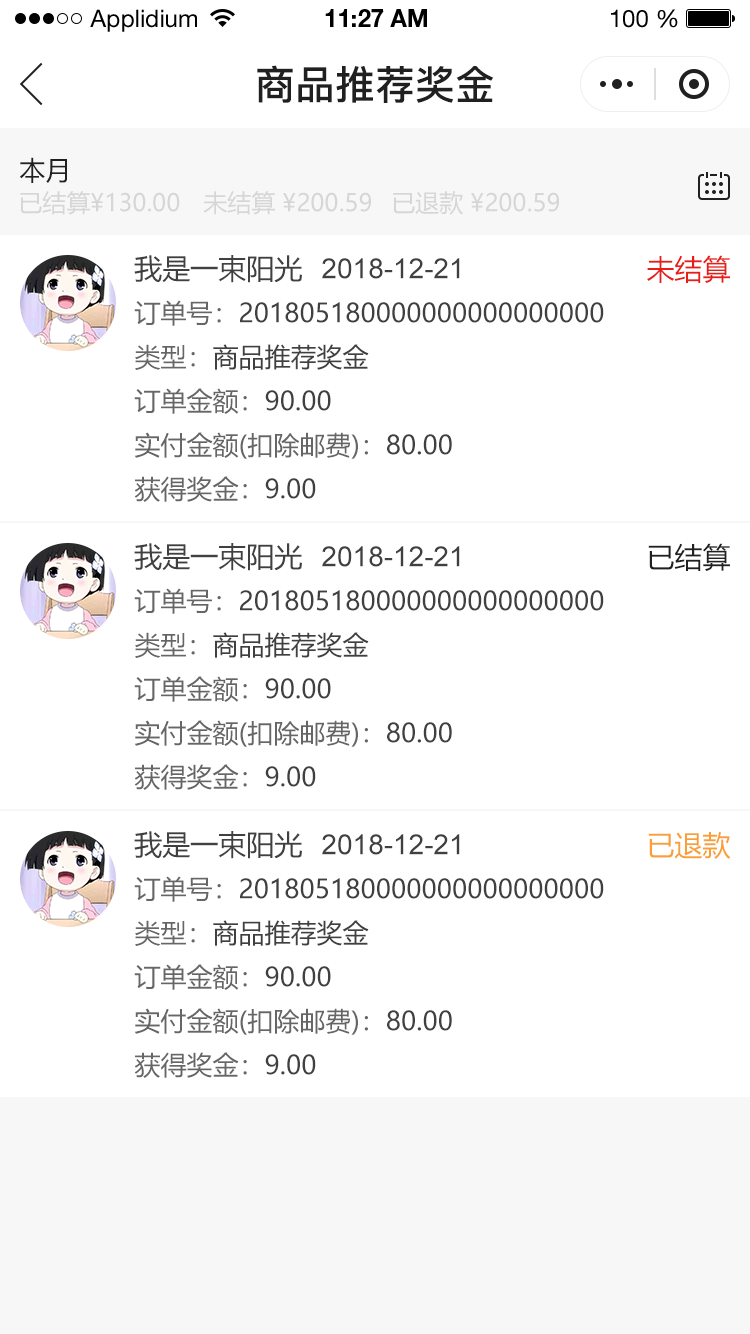
<style>
.page{position:relative;width:750px;height:1334px;background:#ffffff}
.page>*{position:absolute;margin:0}
.t1{font:24px "HelveticaNeueLTStd-Roman";color:#000000}
.t2{font:24px "HelveticaNeueLTStd-Bd";color:#000000}
.t3{font:40px "PingFang-SC-Bold";color:#202020;text-transform:uppercase}
.t4{font:26px "MicrosoftYaHei";color:#202020;text-transform:uppercase}
.t5{font:24px "MicrosoftYaHei";color:#d6d6d6;text-transform:uppercase}
.t6{font:28px "MicrosoftYaHei";color:#404040;text-transform:uppercase}
.t7{font:28px "MicrosoftYaHei";color:#e61f18;text-transform:uppercase}
.t8{font:28px "ArialMT";color:#404040;text-transform:uppercase}
.t9{font:26px "MicrosoftYaHei";color:#404040;text-transform:uppercase}
.t10{font:26px "MicrosoftYaHei";color:#666666;text-transform:uppercase}
.t11{font:28px "MicrosoftYaHei";color:#202020;text-transform:uppercase}
.t12{font:28px "MicrosoftYaHei";color:#f99f36;text-transform:uppercase}
</style>
<div class="page">
<p class="t1" style="left:90px;top:9px;width:107px;height:23px">Applidium</p>
<p class="t2" style="left:325px;top:9px;width:102px;height:18px">11:27 AM</p>
<p class="t1" style="left:611px;top:9px;width:67px;height:19px">100 %</p>
<p class="t3" style="left:257px;top:65px;width:237px;height:38px">商品推荐奖金</p>
<p class="t4" style="left:20px;top:157px;width:47px;height:26px">本月</p>
<p class="t5" style="left:20px;top:191px;width:160px;height:24px">已结算¥130.00</p>
<p class="t5" style="left:203px;top:191px;width:168px;height:24px">未结算 ¥200.59</p>
<p class="t5" style="left:393px;top:191px;width:166px;height:24px">已退款 ¥200.59</p>
<p class="t6" style="left:134px;top:255px;width:168px;height:28px">我是一束阳光</p>
<p class="t7" style="left:647px;top:255px;width:83px;height:28px">未结算</p>
<p class="t8" style="left:322px;top:258px;width:138px;height:21px">2018-12-21</p>
<p class="t9" style="left:134px;top:300px;width:470px;height:26px"><span class="t10">订单号：</span>201805180000000000000000</p>
<p class="t9" style="left:135px;top:344px;width:234px;height:26px"><span class="t10">类型：</span>商品推荐奖金</p>
<p class="t10" style="left:134px;top:388px;width:197px;height:26px">订单金额：<span class="t9">90.00</span></p>
<p class="t10" style="left:134px;top:432px;width:318px;height:27px">实付金额(扣除邮费)：<span class="t9">80.00</span></p>
<p class="t10" style="left:134px;top:476px;width:182px;height:26px">获得奖金：<span class="t9">9.00</span></p>
<p class="t6" style="left:134px;top:543px;width:168px;height:28px">我是一束阳光</p>
<p class="t11" style="left:648px;top:543px;width:82px;height:28px">已结算</p>
<p class="t8" style="left:322px;top:546px;width:138px;height:21px">2018-12-21</p>
<p class="t9" style="left:134px;top:588px;width:470px;height:26px"><span class="t10">订单号：</span>201805180000000000000000</p>
<p class="t9" style="left:135px;top:632px;width:234px;height:26px"><span class="t10">类型：</span>商品推荐奖金</p>
<p class="t10" style="left:134px;top:676px;width:197px;height:26px">订单金额：<span class="t9">90.00</span></p>
<p class="t10" style="left:134px;top:720px;width:318px;height:27px">实付金额(扣除邮费)：<span class="t9">80.00</span></p>
<p class="t10" style="left:134px;top:764px;width:182px;height:26px">获得奖金：<span class="t9">9.00</span></p>
<p class="t6" style="left:134px;top:831px;width:168px;height:28px">我是一束阳光</p>
<p class="t12" style="left:648px;top:832px;width:83px;height:27px">已退款</p>
<p class="t8" style="left:322px;top:834px;width:138px;height:21px">2018-12-21</p>
<p class="t9" style="left:134px;top:876px;width:470px;height:26px"><span class="t10">订单号：</span>201805180000000000000000</p>
<p class="t9" style="left:135px;top:920px;width:234px;height:26px"><span class="t10">类型：</span>商品推荐奖金</p>
<p class="t10" style="left:134px;top:964px;width:197px;height:26px">订单金额：<span class="t9">90.00</span></p>
<p class="t10" style="left:134px;top:1008px;width:318px;height:27px">实付金额(扣除邮费)：<span class="t9">80.00</span></p>
<p class="t10" style="left:134px;top:1052px;width:182px;height:26px">获得奖金：<span class="t9">9.00</span></p>
</div>
